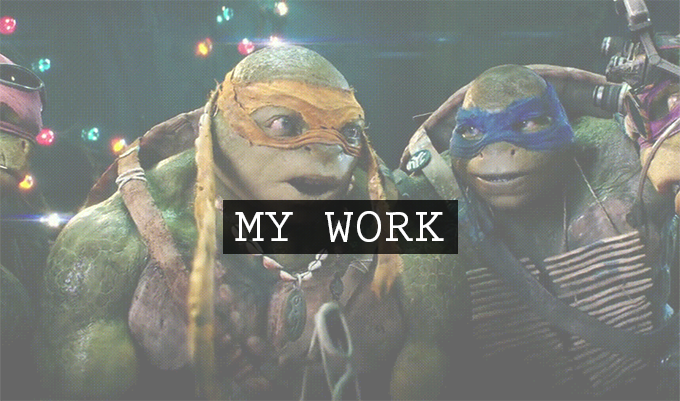
<style>
.page{position:relative;width:680px;height:401px}
.page>*{position:absolute;margin:0}
.t1{font:48px "PrestigeEliteStd-Bd";color:#ffffff;scale:1.05 1}
</style>
<div class="page">
<p class="t1" style="left:235px;top:211px;width:209px;height:31px">MY WORK</p>
</div>
